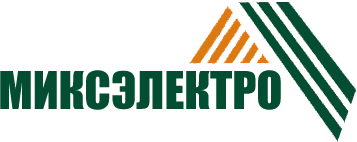
<style>
.page{position:relative;width:357px;height:142px;background:#ffffff}
.page>*{position:absolute;margin:0}
.t1{font:48px "Impact";color:#034d32}
</style>
<div class="page">
<p class="t1" style="left:0px;top:70px;width:281px;height:40px">МИКСЭЛЕКТРО</p>
</div>
